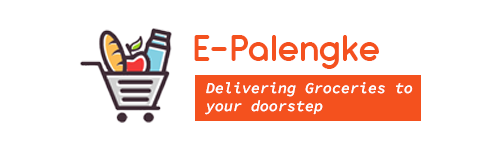
<style>
.page{position:relative;width:500px;height:150px;background:#ffffff}
.page>*{position:absolute;margin:0}
.t1{font:40px "AntipastoPro-DemiBold";color:#f4511e}
.t2{font:15px "SourceCodePro-Medium";color:#fdfdfd}
</style>
<div class="page">
<p class="t1" style="left:194px;top:35px;width:185px;height:34px">E-Palengke</p>
<p class="t2" style="left:205px;top:82px;width:208px;height:33px">Delivering Groceries to <br>your doorstep</p>
</div>
